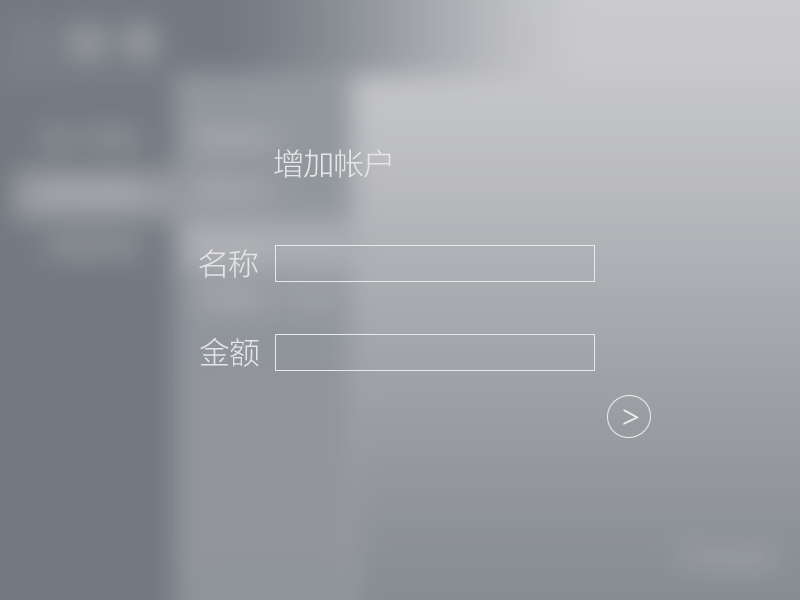
<style>
.page{position:relative;width:800px;height:600px}
.page>*{position:absolute;margin:0}
.t1{font:30px "MicrosoftYaHeiLight";color:#e6e6e6}
</style>
<div class="page">
<p class="t1" style="left:274px;top:149px;width:117px;height:29px">增加帐户</p>
<p class="t1" style="left:199px;top:249px;width:59px;height:29px">名称</p>
<p class="t1" style="left:200px;top:338px;width:59px;height:29px">金额</p>
</div>
